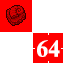
<style>
.page{position:relative;width:64px;height:64px;background:#ffffff}
.page>*{position:absolute;margin:0}
.t1{font:24px "TimesNewRomanPS-BoldMT";color:#ffffff}
</style>
<div class="page">
<p class="t1" style="left:37px;top:40px;width:23px;height:17px">64</p>
</div>
